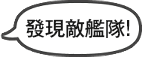
<style>
.page{position:relative;width:142px;height:57px;background:#ffffff}
.page>*{position:absolute;margin:0}
.t1{font:20px "GothicMB101Pr6N-Medium";color:#181817}
</style>
<div class="page">
<p class="t1" style="left:25px;top:18px;width:105px;height:20px">發現敵艦隊!</p>
</div>
